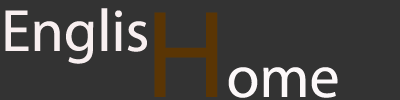
<style>
.page{position:relative;width:400px;height:100px;background:#333333}
.page>*{position:absolute;margin:0}
.t1{font:60px "MyriadPro-Regular";color:#f8eff0}
.t2{font:125px/10px "MyriadPro-Regular";color:#5a3504}
.t3{font:60px/10px "MyriadPro-Regular";color:#fcf8f9}
</style>
<div class="page">
<p class="t1" style="left:5px;top:8px;width:333px;height:90px">Englis<br>    <br><br><br><br>    <span class="t2">H</span><span class="t3">ome</span></p>
</div>
